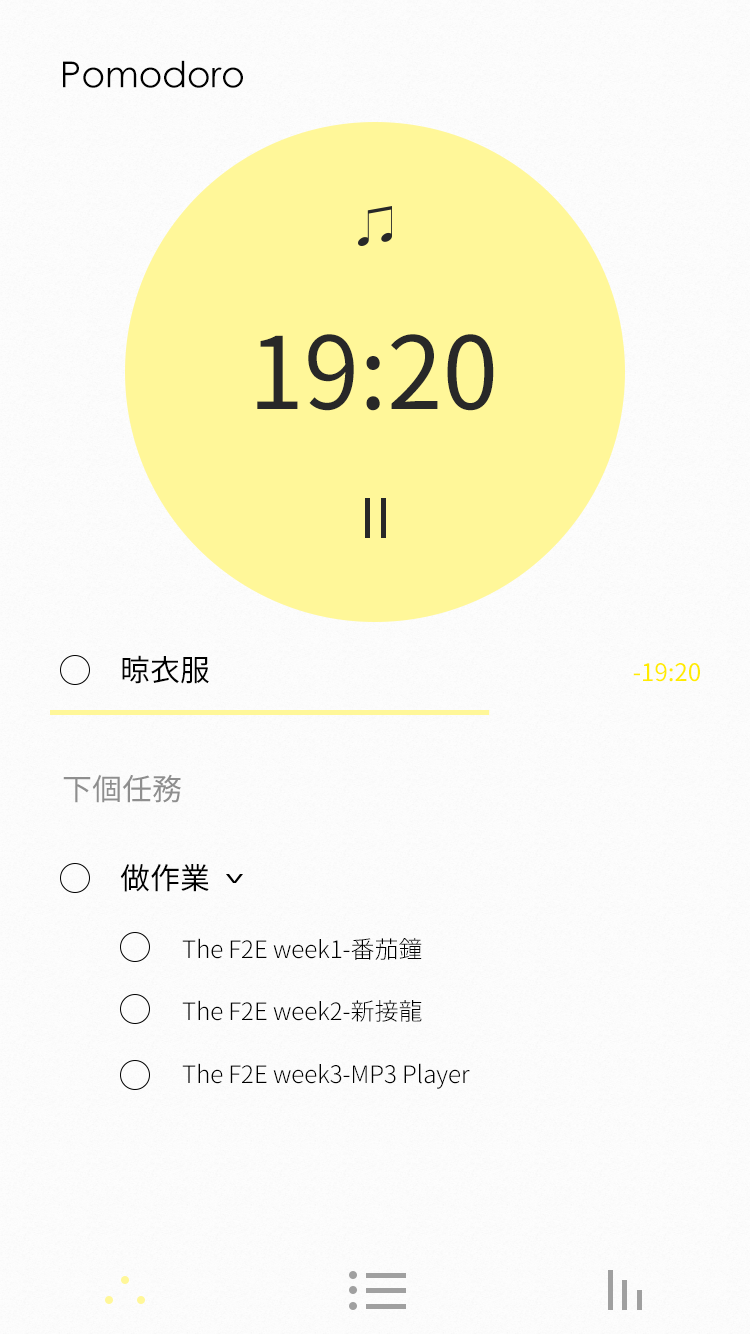
<style>
.page{position:relative;width:750px;height:1334px;background:#fcfcfc}
.page>*{position:absolute;margin:0}
.t1{font:36px "CenturyGothic";color:#000000}
.t2{font:100px "TaipeiSansTCBeta-Regular";color:#282828}
.t3{font:30px "TaipeiSansTCBeta-Regular";color:#000000}
.t4{font:24px "TaipeiSansTCBeta-Regular";color:#ffeb00}
.t5{font:30px "TaipeiSansTCBeta-Regular";color:#8e8e8e}
.t6{font:24px "TaipeiSansTCBeta-Light";color:#000000}
</style>
<div class="page">
<p class="t1" style="left:63px;top:60px;width:180px;height:28px">Pomodoro</p>
<p class="t2" style="left:257px;top:334px;width:237px;height:77px">19:20</p>
<p class="t3" style="left:122px;top:655px;width:87px;height:29px">晾衣服</p>
<p class="t4" style="left:633px;top:663px;width:67px;height:19px">-19:20</p>
<p class="t5" style="left:63px;top:774px;width:118px;height:29px">下個任務</p>
<p class="t3" style="left:120px;top:864px;width:89px;height:28px">做作業</p>
<p class="t6" style="left:182px;top:938px;width:240px;height:22px">The F2E week1-番茄鐘</p>
<p class="t6" style="left:182px;top:1000px;width:240px;height:22px">The F2E week2-新接龍</p>
<p class="t6" style="left:182px;top:1063px;width:288px;height:26px">The F2E week3-MP3 Player</p>
</div>
